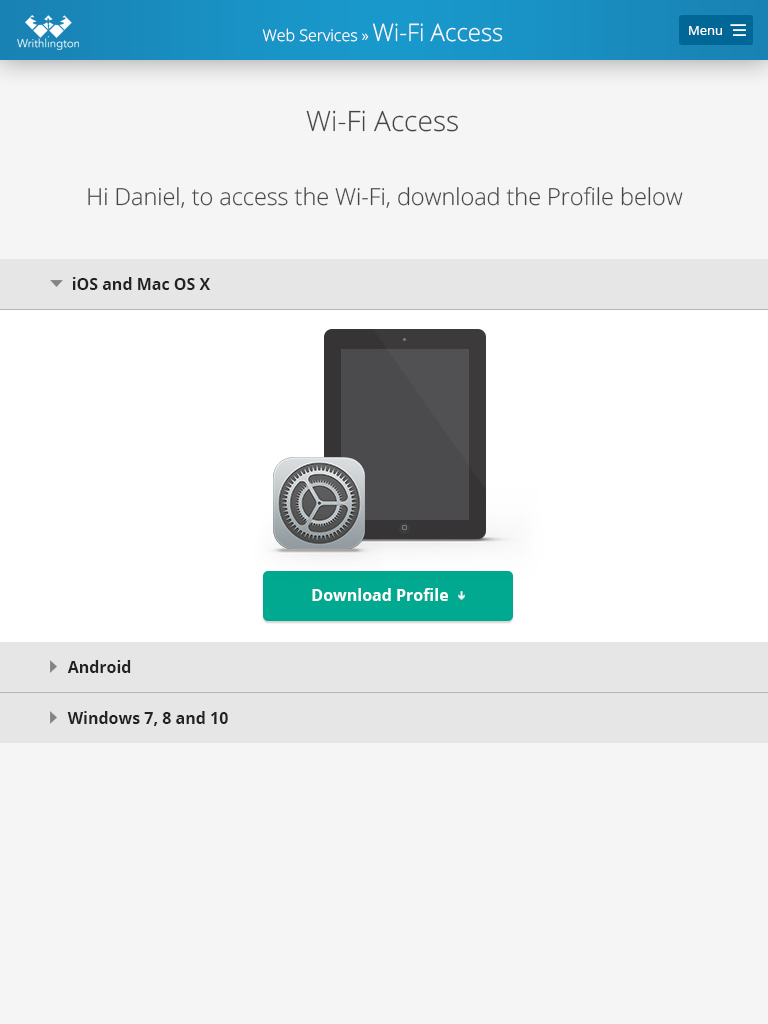
<style>
.page{position:relative;width:768px;height:1024px;background:#f5f5f5}
.page>*{position:absolute;margin:0}
.t1{font:16px "OpenSans-Light";color:#ffffff}
.t2{font:24px "OpenSans-Light";color:#ffffff}
.t3{font:13px "OpenSans";color:#ffffff}
.t4{font:28px "OpenSans-Light";color:#444444}
.t5{font:23.4px "OpenSans-Light";color:#444444}
.t6{font:16px "OpenSans-Bold";color:#222222}
.t7{font:16px "OpenSans-Bold";color:#ffffff}
</style>
<div class="page">
<p class="t1" style="left:262px;top:23px;width:241px;height:19px">Web Services » <span class="t2">Wi-Fi Access</span></p>
<p class="t3" style="left:689px;top:26px;width:33px;height:9px">Menu</p>
<p class="t4" style="left:306px;top:110px;width:152px;height:22px">Wi-Fi Access</p>
<p class="t5" style="left:88px;top:186px;width:595px;height:23px">Hi Daniel, to access the Wi-Fi, download the Profile below</p>
<p class="t6" style="left:72px;top:277px;width:138px;height:13px">iOS and Mac OS X</p>
<p class="t7" style="left:312px;top:588px;width:136px;height:13px">Download Profile</p>
<p class="t6" style="left:67px;top:660px;width:64px;height:13px">Android</p>
<p class="t6" style="left:67px;top:711px;width:161px;height:15px">Windows 7, 8 and 10</p>
</div>
